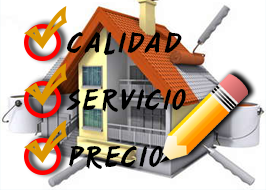
<style>
.page{position:relative;width:266px;height:190px;background:#ffffff}
.page>*{position:absolute;margin:0}
.t1{font:32px "AshleyScriptMTStd";color:#000000}
</style>
<div class="page">
<p class="t1" style="left:67px;top:32px;width:115px;height:23px">CALIDAD</p>
<p class="t1" style="left:66px;top:89px;width:120px;height:23px">SERVICIO</p>
<p class="t1" style="left:69px;top:146px;width:94px;height:23px">PRECIO</p>
</div>
